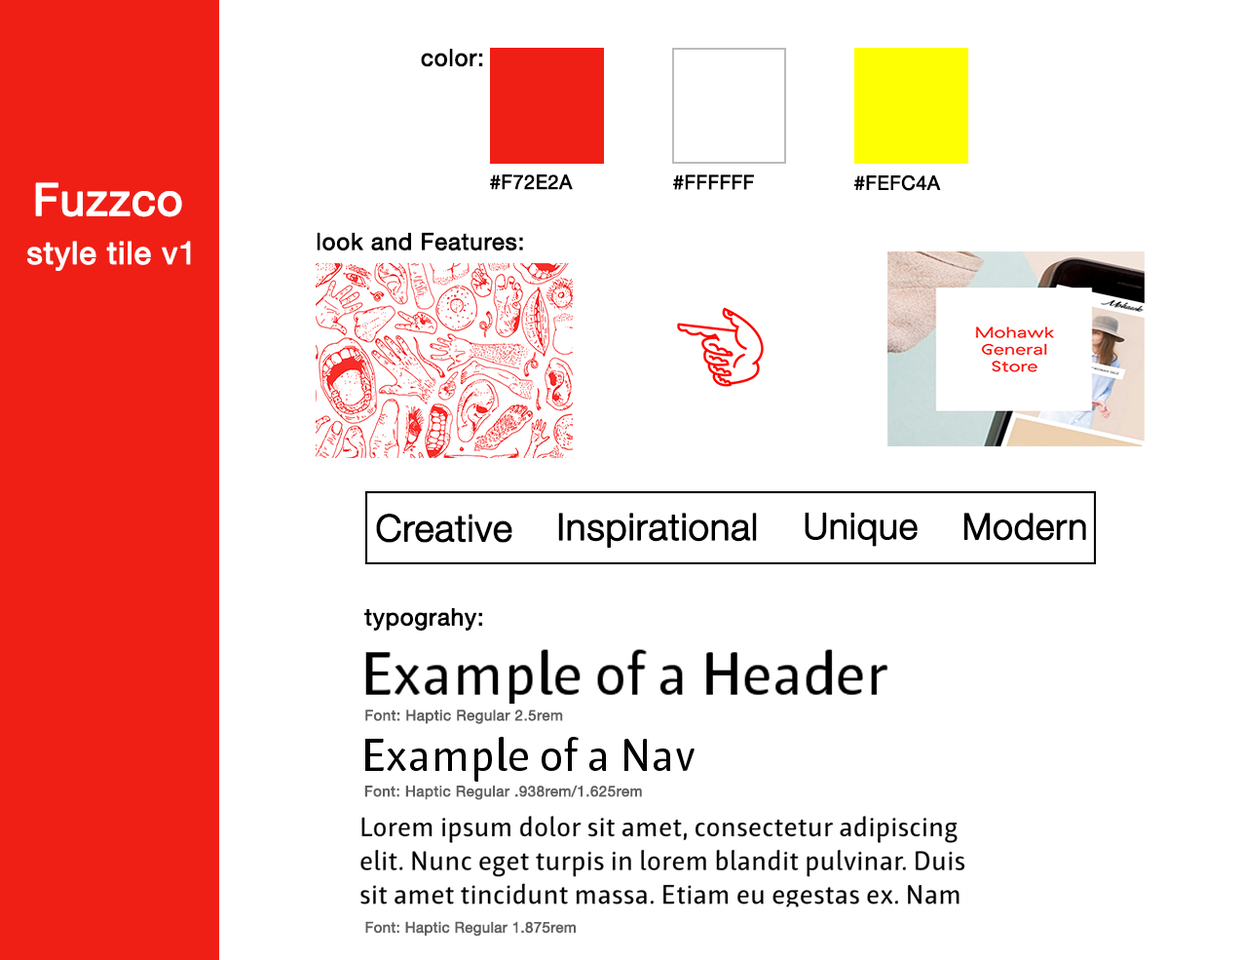
<style>
.page{position:relative;width:1242px;height:960px;background:#ffffff}
.page>*{position:absolute;margin:0}
.t1{font:23.4px "HelveticaNeue";letter-spacing:0.01em;color:#000000;font-weight:bold}
.t2{font:44.8px "HelveticaNeue";color:#ffffff;font-weight:bold}
.t3{font:46.8px "HelveticaNeue";color:#ffffff;font-weight:bold}
.t4{font:19.5px "HelveticaNeue";color:#000000;font-weight:bold}
.t5{font:31.2px "HelveticaNeue";letter-spacing:0.01em;color:#ffffff;font-weight:bold}
.t6{font:37px "HelveticaNeue-Light";color:#000000;font-weight:bold}
.t7{font:36.1px "HelveticaNeue-Light";color:#000000;font-weight:bold}
.t8{font:14.6px "HelveticaNeue";letter-spacing:0.01em;color:#5f605e;font-weight:bold}
.t9{font:14.6px "HelveticaNeue";color:#5f605e;font-weight:bold}
</style>
<div class="page">
<p class="t1" style="left:421px;top:49px;width:62px;height:18px">color:</p>
<p class="t2" style="left:35px;top:182px;width:147px;height:35px"><span class="t3"><br></span>Fuzzco</p>
<p class="t4" style="left:490px;top:174px;width:83px;height:16px">#F72E2A</p>
<p class="t4" style="left:673px;top:174px;width:81px;height:16px">#FFFFFF</p>
<p class="t4" style="left:855px;top:174px;width:86px;height:17px">#FEFC4A</p>
<p class="t1" style="left:317px;top:232px;width:206px;height:18px">look and Features:</p>
<p class="t5" style="left:27px;top:241px;width:164px;height:30px">style tile v1</p>
<p class="t6" style="left:376px;top:514px;width:137px;height:29px">Creative</p>
<p class="t6" style="left:558px;top:513px;width:199px;height:35px">Inspirational</p>
<p class="t7" style="left:805px;top:513px;width:113px;height:34px">Unique</p>
<p class="t7" style="left:964px;top:513px;width:122px;height:28px">Modern</p>
<p class="t1" style="left:364px;top:608px;width:118px;height:22px">typograhy:</p>
<p class="t8" style="left:365px;top:709px;width:198px;height:15px">Font: Haptic Regular 2.5rem</p>
<p class="t8" style="left:364px;top:784px;width:278px;height:16px">Font: Haptic Regular .938rem/1.625rem</p>
<p class="t9" style="left:365px;top:921px;width:211px;height:15px">Font: Haptic Regular 1.875rem</p>
</div>
